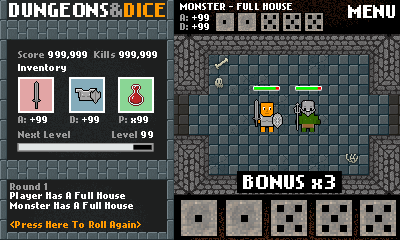
<style>
.page{position:relative;width:400px;height:240px}
.page>*{position:absolute;margin:0}
.t1{font:16px "NokiaCellphoneFC-Small";text-transform:uppercase}
.t2{font:16px "NokiaCellphoneFC-Small";color:#ffffff;text-transform:uppercase}
.t3{font:16px "NokiaCellphoneFC-Small";color:#999999;text-transform:uppercase}
.t4{font:16px "NokiaCellphoneFC-Small";color:#ff9900;text-transform:uppercase}
.t5{font:8px "NokiaCellphoneFC-Small";letter-spacing:0.01em;color:#ffffff}
.t6{font:15.4px "NokiaCellphoneFC-Small";letter-spacing:-0.075em;color:#ffffff;text-transform:uppercase}
.t7{font:8px "NokiaCellphoneFC-Small";letter-spacing:0.01em;color:#999999}
.t8{font:8px "NokiaCellphoneFC-Small";letter-spacing:0.01em;color:#ff9900}
.t9{font:16px "NokiaCellphoneFC-Small";letter-spacing:0.01em;color:#ffffff}
</style>
<div class="page">
<p class="t1" style="left:9px;top:3px;width:156px;height:14px">DUNGEONs&amp;DICE</p>
<p class="t2" style="left:9px;top:3px;width:156px;height:14px">DUNGEONs<span class="t3">&amp;</span><span class="t4">DICE</span></p>
<p class="t5" style="left:180px;top:3px;width:112px;height:7px">MONSTER - FULL HOUSE</p>
<p class="t6" style="left:348px;top:5px;width:47px;height:13px">Menu</p>
<p class="t5" style="left:180px;top:14px;width:29px;height:16px"><span class="t7">A: </span>+99<br><span class="t7">D:</span> +99</p>
<p class="t5" style="left:18px;top:51px;width:139px;height:8px"><span class="t7">Score </span>999,999  <span class="t7">Kills </span>999,999</p>
<p class="t5" style="left:18px;top:64px;width:48px;height:8px">Inventory</p>
<p class="t5" style="left:18px;top:116px;width:130px;height:7px"><span class="t7">A: </span>+99       <span class="t7">D:</span> +99      <span class="t7">P:</span> x99</p>
<p class="t7" style="left:18px;top:131px;width:52px;height:7px">Next Level</p>
<p class="t7" style="left:112px;top:131px;width:41px;height:7px">Level <span class="t5">99</span></p>
<p class="t5" style="left:10px;top:183px;width:131px;height:46px"><span class="t7">Round 1<br></span>Player Has A Full House<br>Monster Has A Full House<br><br><span class="t8">&lt;Press Here To Roll Again&gt;</span></p>
<p class="t9" style="left:243px;top:175px;width:92px;height:14px">BONUS x3</p>
</div>
